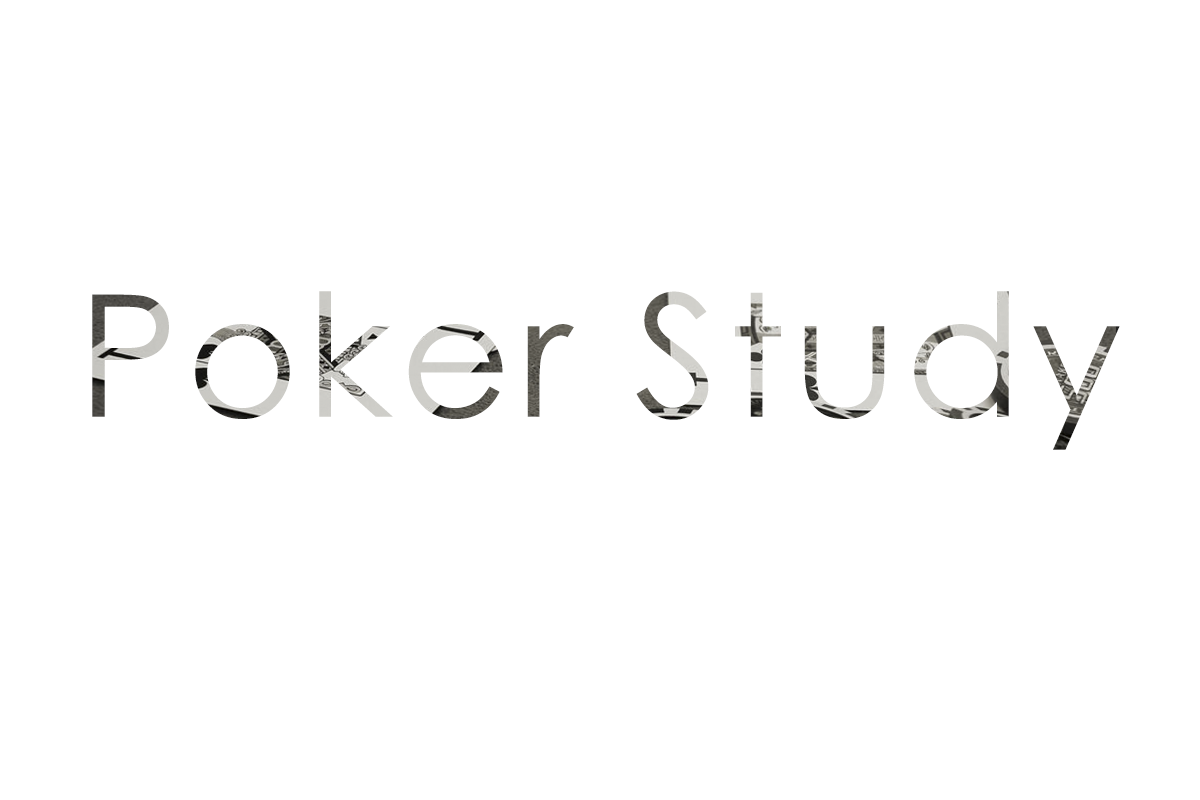
<style>
.page{position:relative;width:1200px;height:800px;background:#ffffff}
.page>*{position:absolute;margin:0}
.t1{font:169.9px "CenturyGothic";letter-spacing:0.05em}
</style>
<div class="page">
<p class="t1" style="left:92px;top:291px;width:1028px;height:159px">Poker Study</p>
</div>
